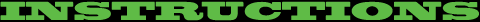
<style>
.page{position:relative;width:480px;height:22px;background:#5fbb46}
.page>*{position:absolute;margin:0}
.t1{font:24px "BlackoakStd";color:#5fbb46}
</style>
<div class="page">
<p class="t1" style="left:0px;top:1px;width:479px;height:20px">INSTRUCTIONS</p>
</div>
